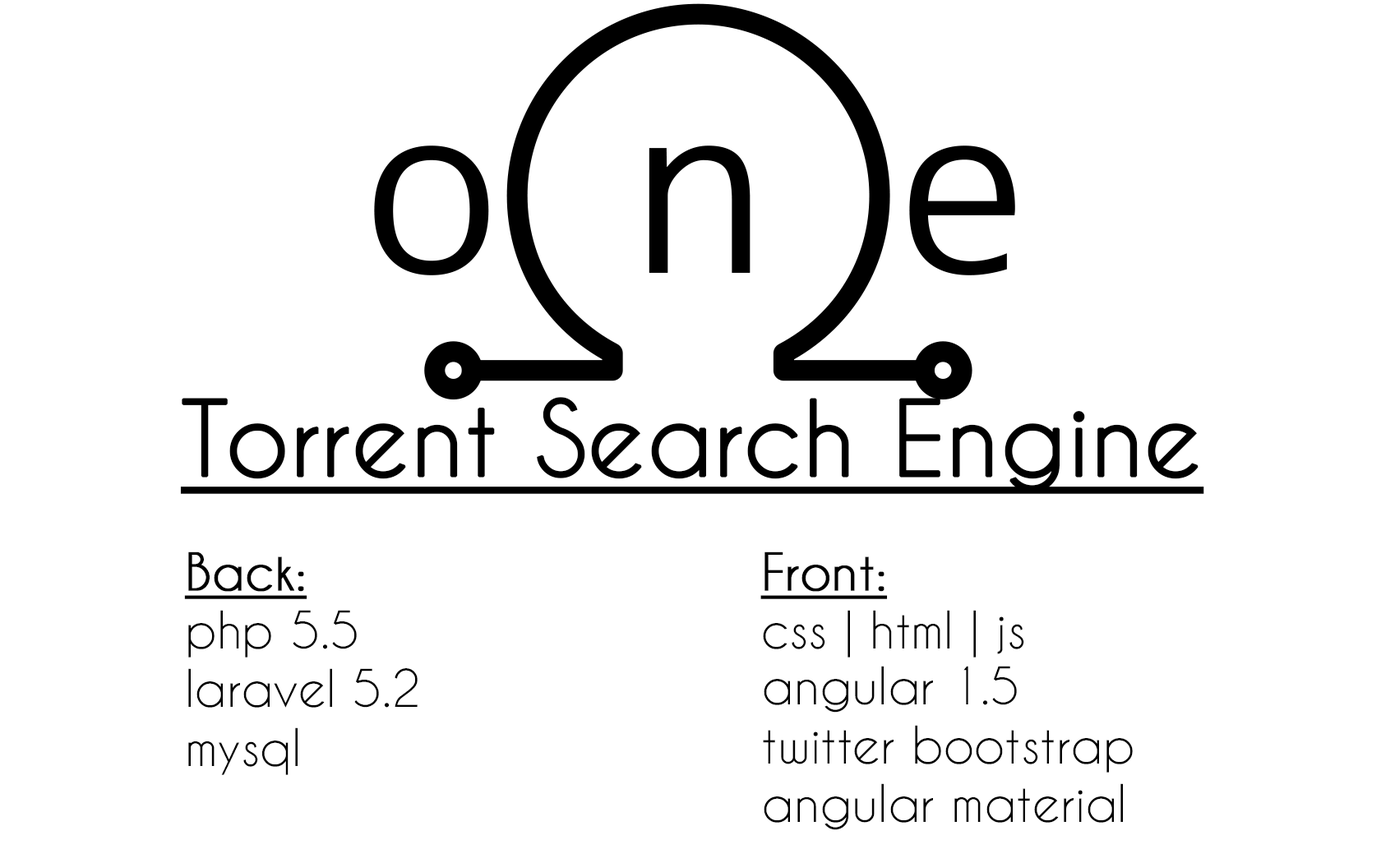
<style>
.page{position:relative;width:1381px;height:863px;background:#ffffff}
.page>*{position:absolute;margin:0}
.t1{font:97.6px "CaviarDreams";color:#000000;font-weight:bold;text-decoration:underline}
.t2{font:48.8px "CaviarDreams";color:#000000}
.t3{font:48.8px "CaviarDreams";color:#000000;font-weight:bold;text-decoration:underline}
</style>
<div class="page">
<p class="t1" style="left:180px;top:397px;width:1024px;height:97px">Torrent Search Engine</p>
<p class="t2" style="left:184px;top:552px;width:234px;height:223px;text-align:right"><span class="t3">Back:<br></span>php 5.5<br>laravel 5.2<br>mysql</p>
<p class="t2" style="left:761px;top:552px;width:263px;height:106px;text-align:right"><span class="t3">Front:<br></span>css | html | js</p>
<p class="t2" style="left:763px;top:666px;width:370px;height:164px;text-align:right">angular 1.5<br>twitter bootstrap<br>angular material</p>
</div>
